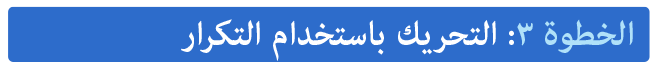
<style>
.page{position:relative;width:656px;height:72px;background:#2d6ccb}
.page>*{position:absolute;margin:0}
.t1{font:48px "AdobeArabic-Bold";color:#ffffff}
.t2{font:48px "AdobeArabic-Bold";color:#b0e1f9}
</style>
<div class="page">
<p class="t1" style="left:181px;top:19px;width:452px;height:42px"><span class="t2">الخطوة ٣</span>: التحريك باستخدام التكرار</p>
</div>
